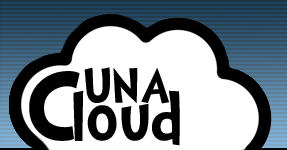
<style>
.page{position:relative;width:287px;height:150px;background:#ffffff}
.page>*{position:absolute;margin:0}
.t1{font:100px "Doctor-Soos-Bold";color:#000000}
.t2{font:50px "Doctor-Soos-Bold";color:#000000}
.t3{font:72px "Doctor-Soos-Bold";color:#000000}
</style>
<div class="page">
<p class="t1" style="left:29px;top:71px;width:51px;height:70px">C</p>
<p class="t2" style="left:84px;top:67px;width:85px;height:37px">UNA</p>
<p class="t3" style="left:73px;top:90px;width:107px;height:56px">loud</p>
</div>
